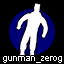
<style>
.page{position:relative;width:64px;height:64px;background:#000000}
.page>*{position:absolute;margin:0}
.t1{font:9px "ArialMT";color:#ffffff}
</style>
<div class="page">
<p class="t1" style="left:3px;top:56px;width:59px;height:7px">gunman_zerog</p>
</div>
